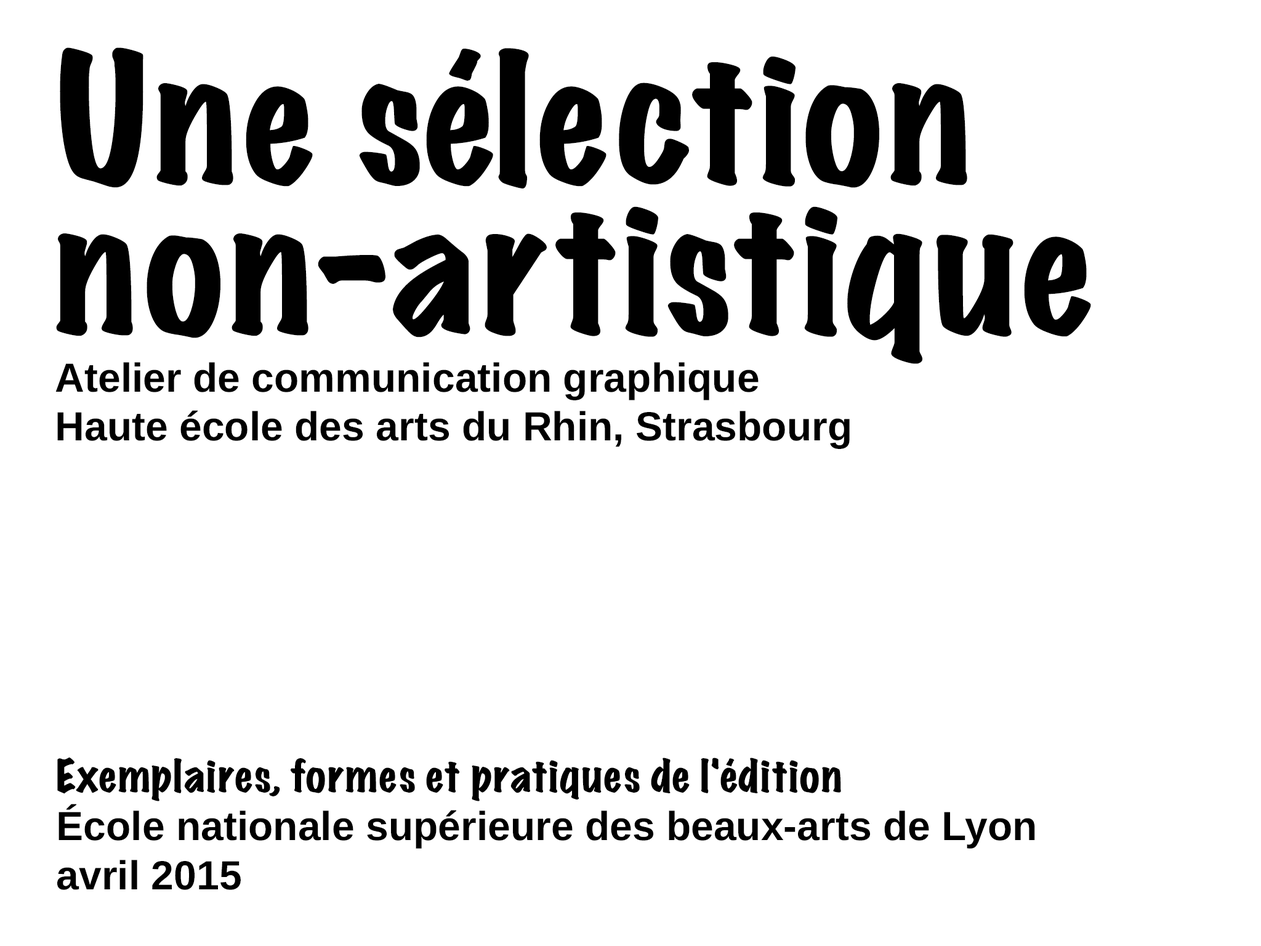
<style>
.page{position:relative;width:1261px;height:946px;background:#ffffff}
.page>*{position:absolute;margin:0}
.t1{font:40.6px "Arimo-Bold";color:#000000}
.t2{font:162.5px/150.2px "MarkerFelt-Wide";color:#000000}
.t3{font:40.6px/60.3px "Arimo-Bold";color:#000000}
.t4{font:40.6px "MarkerFelt-Wide";color:#000000}
</style>
<div class="page">
<p class="t1" style="left:55px;top:47px;width:1036px;height:402px"><span class="t2">Une sélection<br>non-artistique<br></span><span class="t3">Atelier de communication graphique<br></span>Haute école des arts du Rhin, Strasbourg</p>
<p class="t1" style="left:57px;top:757px;width:978px;height:133px"><span class="t4">Exemplaires, formes et pratiques de l'édition<br></span>École nationale supérieure des beaux-arts de Lyon<br>avril 2015</p>
</div>
